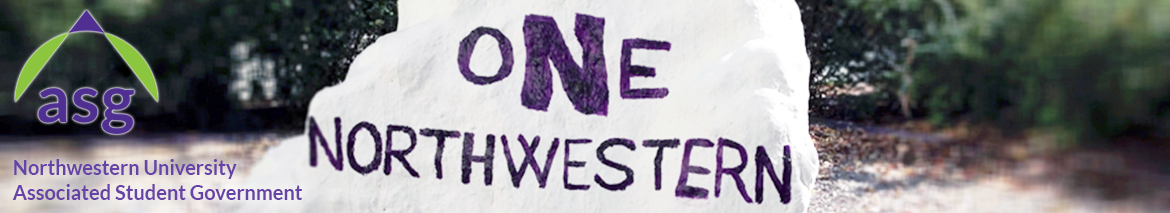
<style>
.page{position:relative;width:1170px;height:213px}
.page>*{position:absolute;margin:0}
.t1{font:20px/25px "Lato-Bold";color:#6742a7}
</style>
<div class="page">
<p class="t1" style="left:12px;top:159px;width:290px;height:41px">Northwestern University<br>Associated Student Government</p>
</div>
